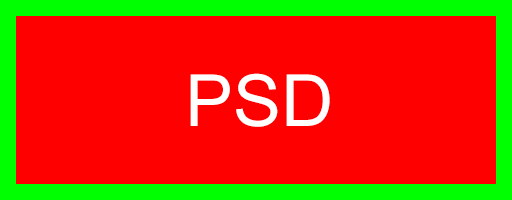
<style>
.page{position:relative;width:512px;height:200px;background:#ff0000}
.page>*{position:absolute;margin:0}
.t1{font:72px "ArialMT";color:#ffffff}
</style>
<div class="page">
<p class="t1" style="left:190px;top:73px;width:140px;height:54px">PSD</p>
</div>
